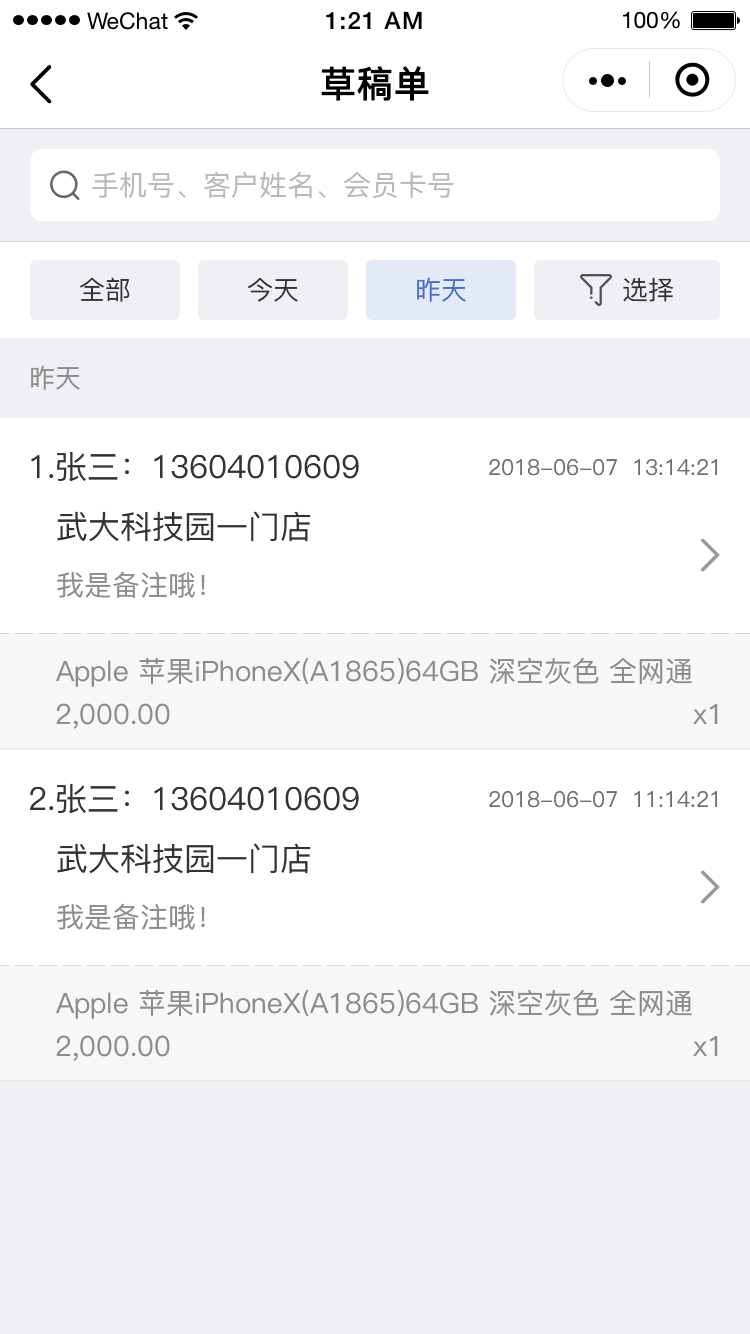
<style>
.page{position:relative;width:750px;height:1334px;background:#ffffff}
.page>*{position:absolute;margin:0}
.t1{font:36px "PingFang-SC-Medium";color:#000000;font-weight:bold}
.t2{font:28px "PingFang-SC-Medium";color:#b8b8b8}
.t3{font:26px "PingFang-SC-Medium";color:#333333}
.t4{font:26px "PingFang-SC-Medium";color:#476ec9}
.t5{font:26px "PingFang-SC-Medium";color:#8c8c8c}
.t6{font:32px "PingFang-SC-Medium";color:#333333}
.t7{font:22px "PingFang-SC-Medium";color:#6e6e6e}
.t8{font:28px "PingFang-SC-Medium";color:#8c8c8c}
</style>
<div class="page">
<p class="t1" style="left:321px;top:66px;width:108px;height:35px">草稿单</p>
<p class="t2" style="left:92px;top:172px;width:362px;height:26px">手机号、客户姓名、会员卡号</p>
<p class="t3" style="left:80px;top:277px;width:50px;height:25px">全部</p>
<p class="t3" style="left:248px;top:278px;width:50px;height:24px">今天</p>
<p class="t4" style="left:417px;top:277px;width:49px;height:25px">昨天</p>
<p class="t3" style="left:623px;top:277px;width:50px;height:25px">选择</p>
<p class="t5" style="left:31px;top:365px;width:49px;height:25px">昨天</p>
<p class="t6" style="left:31px;top:451px;width:328px;height:31px">1.张三：13604010609</p>
<p class="t7" style="left:489px;top:459px;width:228px;height:17px">2018-06-07  13:14:21</p>
<p class="t6" style="left:57px;top:511px;width:254px;height:31px">武大科技园一门店</p>
<p class="t8" style="left:57px;top:571px;width:148px;height:27px">我是备注哦！</p>
<p class="t8" style="left:56px;top:657px;width:636px;height:30px">Apple 苹果iPhoneX(A1865)64GB 深空灰色 全网通</p>
<p class="t8" style="left:56px;top:703px;width:114px;height:26px">2,000.00</p>
<p class="t8" style="left:693px;top:704px;width:25px;height:20px">x1</p>
<p class="t6" style="left:30px;top:783px;width:329px;height:31px">2.张三：13604010609</p>
<p class="t7" style="left:489px;top:791px;width:228px;height:17px">2018-06-07  11:14:21</p>
<p class="t6" style="left:57px;top:843px;width:254px;height:31px">武大科技园一门店</p>
<p class="t8" style="left:57px;top:903px;width:148px;height:27px">我是备注哦！</p>
<p class="t8" style="left:56px;top:989px;width:636px;height:30px">Apple 苹果iPhoneX(A1865)64GB 深空灰色 全网通</p>
<p class="t8" style="left:56px;top:1035px;width:114px;height:26px">2,000.00</p>
<p class="t8" style="left:693px;top:1036px;width:25px;height:20px">x1</p>
</div>
